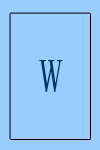
<style>
.page{position:relative;width:100px;height:150px;background:#99ccff}
.page>*{position:absolute;margin:0}
.t1{font:48px "SimSun";color:#003366}
</style>
<div class="page">
<p class="t1" style="left:39px;top:60px;width:24px;height:32px">W</p>
</div>
